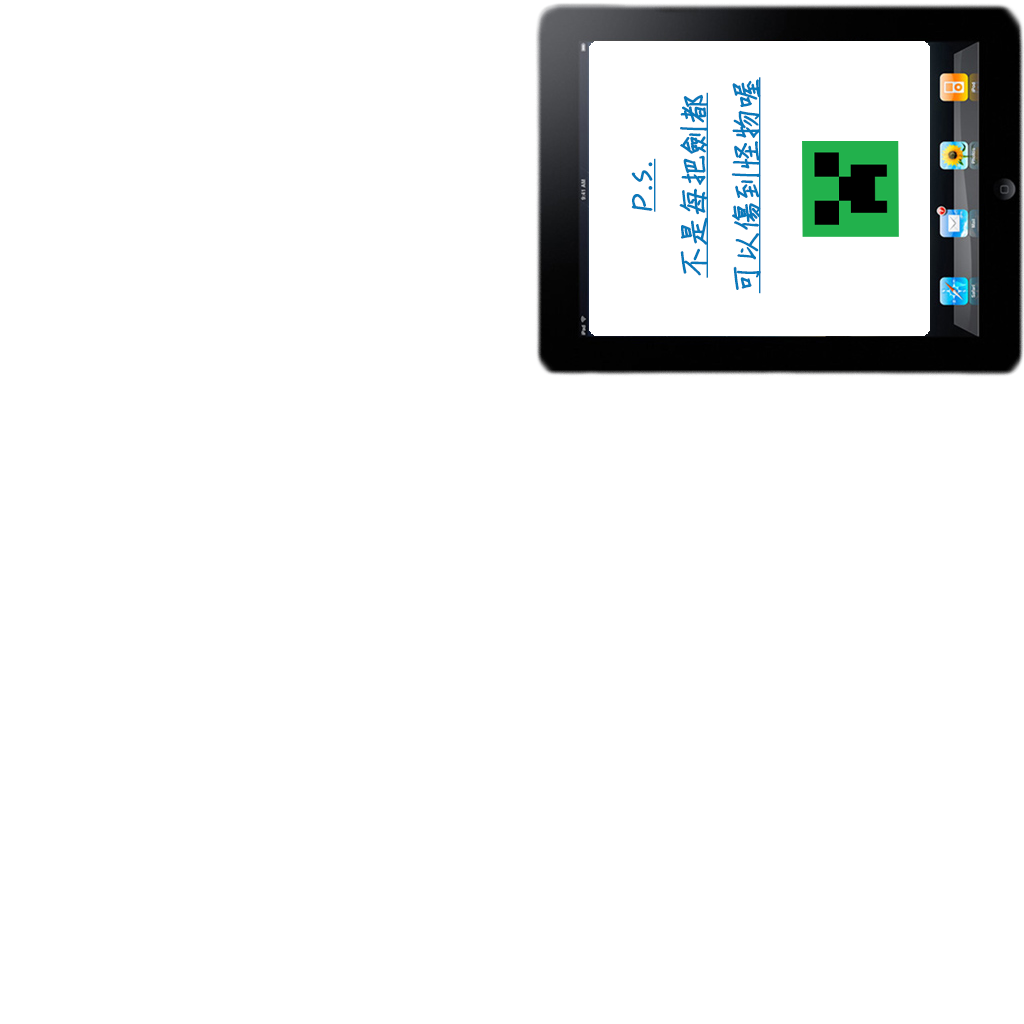
<style>
.page{position:relative;width:1024px;height:1024px;background:#ffffff}
.page>*{position:absolute;margin:0}
.t1{font:30px "DFChu-W4-WINP-BF";color:#0979ba;font-weight:bold;text-decoration:underline}
</style>
<div class="page">
<p class="t1" style="left:631px;top:77px;width:130px;height:217px;text-align:center;rotate:-90deg">P.S.<br>不是每把劍都<br>可以傷到怪物喔</p>
</div>
